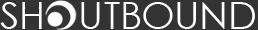
<style>
.page{position:relative;width:258px;height:30px;background:#333333}
.page>*{position:absolute;margin:0}
.t1{font:37px "CenturyGothic";color:#ffffff}
.t2{font:37.6px "CenturyGothic";color:#ffffff}
</style>
<div class="page">
<p class="t1" style="left:0px;top:2px;width:255px;height:27px"><span class="t2">S</span>H   UT<span class="t2">BOUND</span></p>
</div>
